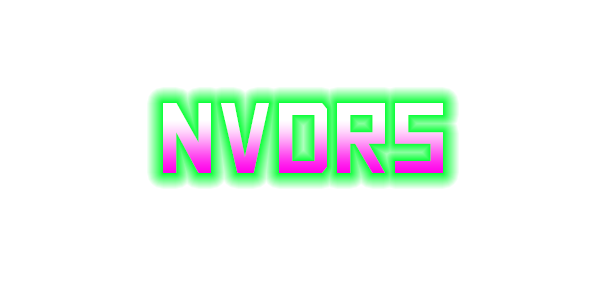
<style>
.page{position:relative;width:600px;height:300px;background:#ffffff}
.page>*{position:absolute;margin:0}
.t1{font:100px "SquareFont"}
</style>
<div class="page">
<p class="t1" style="left:163px;top:103px;width:280px;height:70px">nvdrs</p>
</div>
